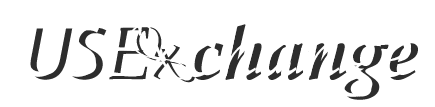
<style>
.page{position:relative;width:435px;height:107px;background:#ffffff}
.page>*{position:absolute;margin:0}
.t1{font:75px "BookAntiqua-BoldItalic";color:#2d2d2d}
.t2{font:75px "MyriadPro-It";color:#2d2d2d}
.t3{font:75px "BookAntiqua-Italic";color:#2d2d2d}
.t4{font:52.9px "Vivaldii";color:#2d2d2d}
</style>
<div class="page">
<p class="t1" style="left:30px;top:24px;width:388px;height:76px"><span class="t2">US</span><span class="t3">E   </span>change</p>
<p class="t4" style="left:136px;top:27px;width:59px;height:56px;rotate:62deg">X</p>
</div>
